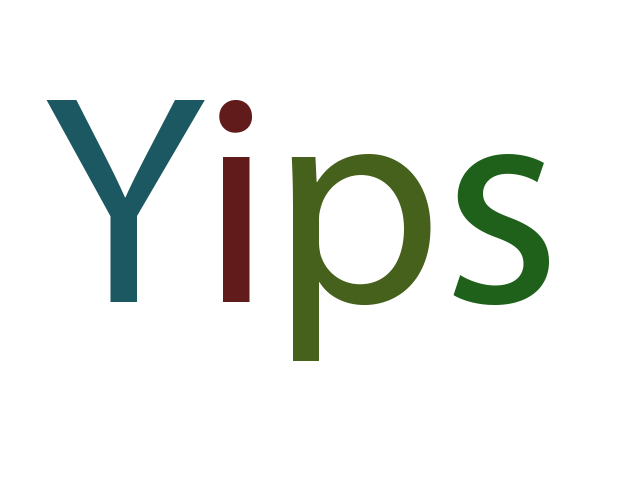
<style>
.page{position:relative;width:640px;height:480px;background:#ffffff}
.page>*{position:absolute;margin:0}
.t1{font:300px "MyriadPro-Regular";color:#1c5962}
.t2{font:300px "MyriadPro-Regular";color:#621c1c}
.t3{font:300px "MyriadPro-Regular";color:#47621c}
.t4{font:300px "MyriadPro-Regular";color:#1f621c}
</style>
<div class="page">
<p class="t1" style="left:46px;top:100px;width:503px;height:261px">Y<span class="t2">i</span><span class="t3">p</span><span class="t4">s</span></p>
</div>
